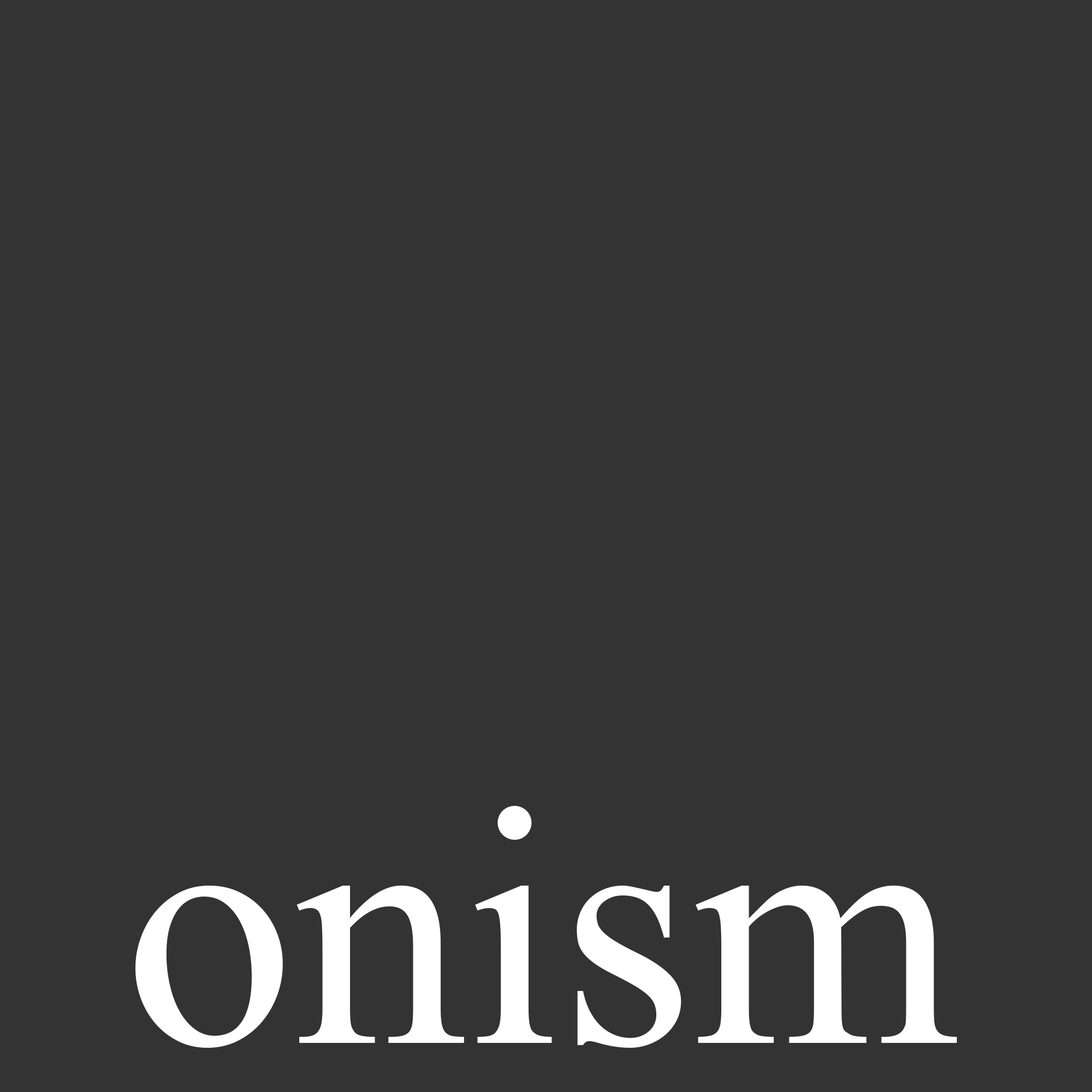
<style>
.page{position:relative;width:1092px;height:1092px;background:#333333}
.page>*{position:absolute;margin:0}
.t1{font:341.2px "MongolianBaiti";color:#ffffff}
</style>
<div class="page">
<p class="t1" style="left:135px;top:806px;width:822px;height:242px">onism</p>
</div>
